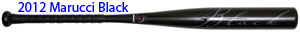
<style>
.page{position:relative;width:300px;height:32px;background:#ffffff}
.page>*{position:absolute;margin:0}
.t1{font:14px "MyriadPro-Regular";color:#0000ff}
</style>
<div class="page">
<p class="t1" style="left:18px;top:2px;width:111px;height:10px">2012 Marucci Black</p>
</div>
